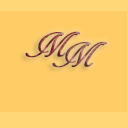
<style>
.page{position:relative;width:128px;height:128px;background:#ffcc66}
.page>*{position:absolute;margin:0}
.t1{font:36px "ARDECODE";letter-spacing:0.2em;font-weight:bold;font-style:italic}
</style>
<div class="page">
<p class="t1" style="left:25px;top:31px;width:56px;height:27px">MM</p>
<p class="t1" style="left:52px;top:41px;width:56px;height:27px">M</p>
</div>
